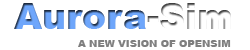
<style>
.page{position:relative;width:250px;height:50px;background:#ffffff}
.page>*{position:absolute;margin:0}
.t1{font:36px "Arial-Black";color:#6ea6fb}
.t2{font:36px "Arial-Black";color:#ffffff}
.t3{font:10px "Arial-Black";color:#7f7f7f}
</style>
<div class="page">
<p class="t1" style="left:14px;top:3px;width:217px;height:26px">Aurora<span class="t2">-Sim</span></p>
<p class="t3" style="left:78px;top:40px;width:153px;height:7px">A NEW VISION OF OPENSIM</p>
</div>
